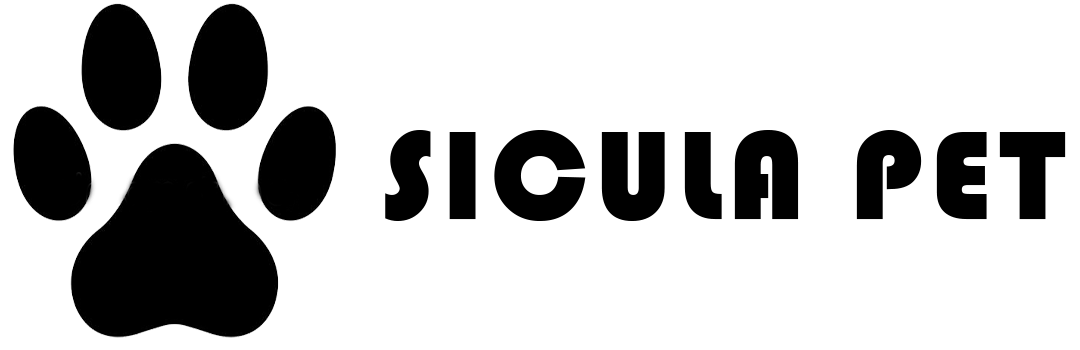
<style>
.page{position:relative;width:1080px;height:350px;background:#ffffff}
.page>*{position:absolute;margin:0}
.t1{font:130px "Bauhaus93";letter-spacing:0.05em;color:#000000;text-transform:uppercase}
</style>
<div class="page">
<p class="t1" style="left:385px;top:130px;width:681px;height:91px">sicula pet</p>
</div>
